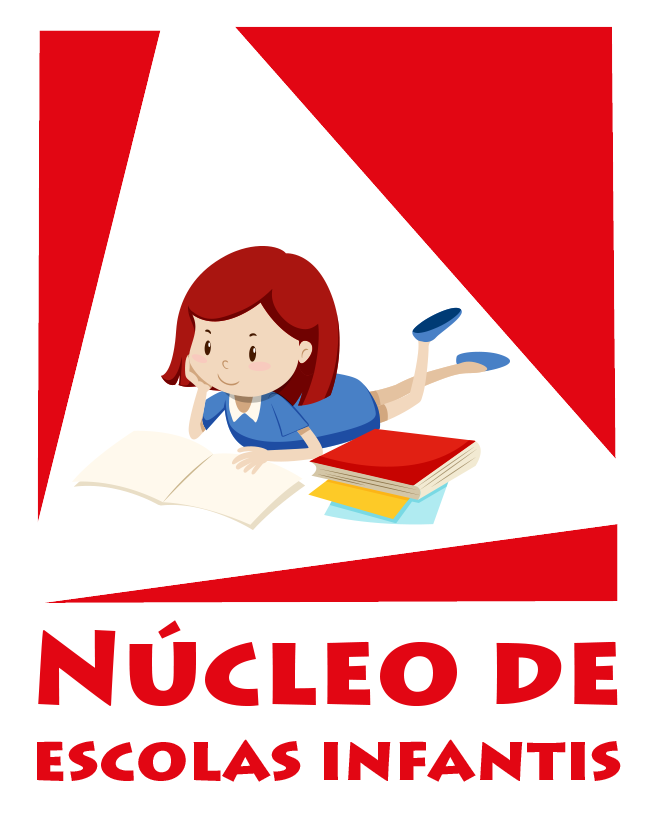
<style>
.page{position:relative;width:660px;height:823px;background:#ffffff}
.page>*{position:absolute;margin:0}
.t1{font:63.2px "LithosPro-Black";color:#e20613}
.t2{font:102.8px "LithosPro-Black";color:#e20613}
</style>
<div class="page">
<p class="t1" style="left:37px;top:620px;width:584px;height:162px"><span class="t2">Núcleo de <br></span>escolas infantis</p>
</div>
